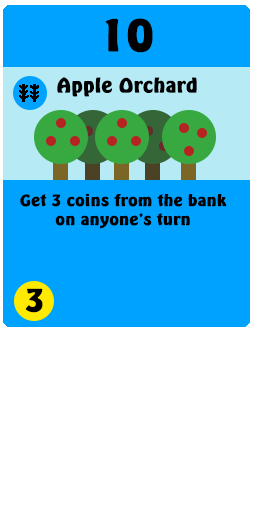
<style>
.page{position:relative;width:256px;height:512px;background:#ffffff}
.page>*{position:absolute;margin:0}
.t1{font:44.6px "Emmett";color:#000000;scale:1.03 1}
.t2{font:20.5px "Emmett";color:#000000;scale:1.03 1}
.t3{font:16.2px/19px "Emmett";color:#000000;scale:1.07 1}
.t4{font:32.4px "Emmett";color:#000000;scale:1.07 1}
</style>
<div class="page">
<p class="t1" style="left:105px;top:18px;width:48px;height:35px">10</p>
<p class="t2" style="left:57px;top:77px;width:140px;height:20px">Apple Orchard</p>
<p class="t3" style="left:20px;top:193px;width:207px;height:36px;text-align:center">Get 3 coins from the bank on anyone’s turn</p>
<p class="t4" style="left:25px;top:288px;width:18px;height:25px">3</p>
</div>
